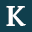
<style>
.page{position:relative;width:32px;height:32px;background:#103f4d}
.page>*{position:absolute;margin:0}
.t1{font:32px "DavidLibre-Bold";color:#ffffff}
</style>
<div class="page">
<p class="t1" style="left:6px;top:6px;width:20px;height:20px">K</p>
</div>
